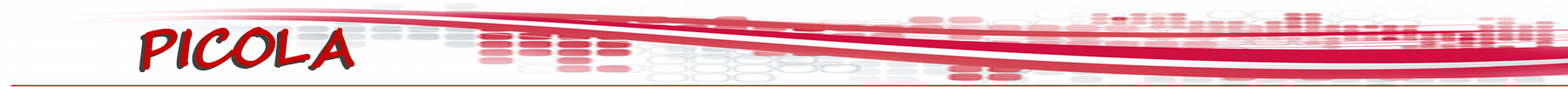
<style>
.page{position:relative;width:1568px;height:87px;background:#ffffff}
.page>*{position:absolute;margin:0}
.t1{font:52.3px "SegoeScript-Bold";color:#c80202}
</style>
<div class="page">
<p class="t1" style="left:143px;top:27px;width:212px;height:43px">PICOLA</p>
</div>
